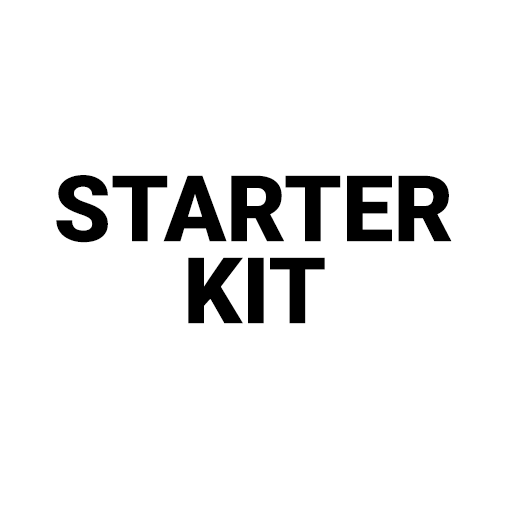
<style>
.page{position:relative;width:512px;height:512px;background:#ffffff}
.page>*{position:absolute;margin:0}
.t1{font:92px/82px "Roboto-Black";color:#000000;text-transform:uppercase}
</style>
<div class="page">
<p class="t1" style="left:56px;top:175px;width:396px;height:149px;text-align:center">Starter<br>kit</p>
</div>
